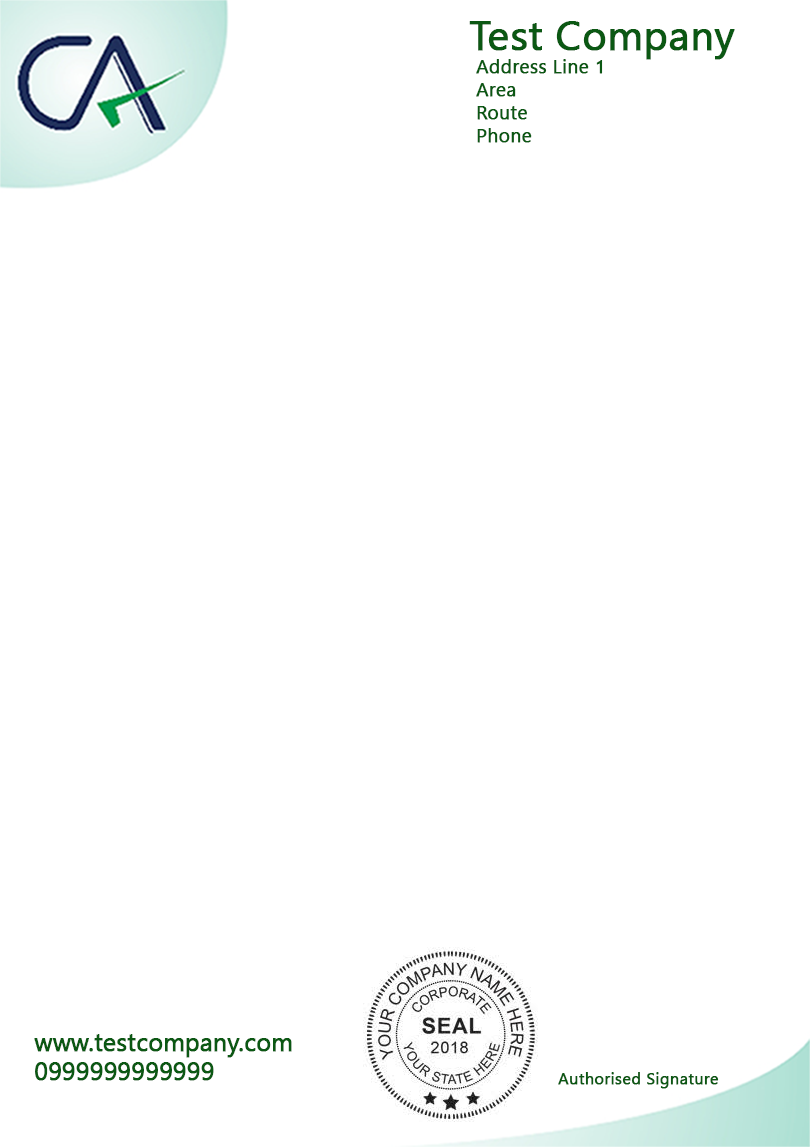
<style>
.page{position:relative;width:810px;height:1147px;background:#ffffff}
.page>*{position:absolute;margin:0}
.t1{font:40.8px "LeelawadeeUI";color:#0b5813;font-weight:bold}
.t2{font:19.1px "LeelawadeeUI";color:#0b5813;font-weight:bold}
.t3{font:24.5px "LeelawadeeUI";color:#0b5813;font-weight:bold}
.t4{font:16.3px "LeelawadeeUI";color:#0b5813;font-weight:bold}
</style>
<div class="page">
<p class="t1" style="left:469px;top:21px;width:266px;height:39px">Test Company</p>
<p class="t2" style="left:476px;top:59px;width:127px;height:84px">Address Line 1<br>Area <br>Route<br>Phone</p>
<p class="t3" style="left:34px;top:1034px;width:258px;height:47px">www.testcompany.com<br>0999999999999</p>
<p class="t4" style="left:558px;top:1072px;width:161px;height:17px">Authorised Signature</p>
</div>
